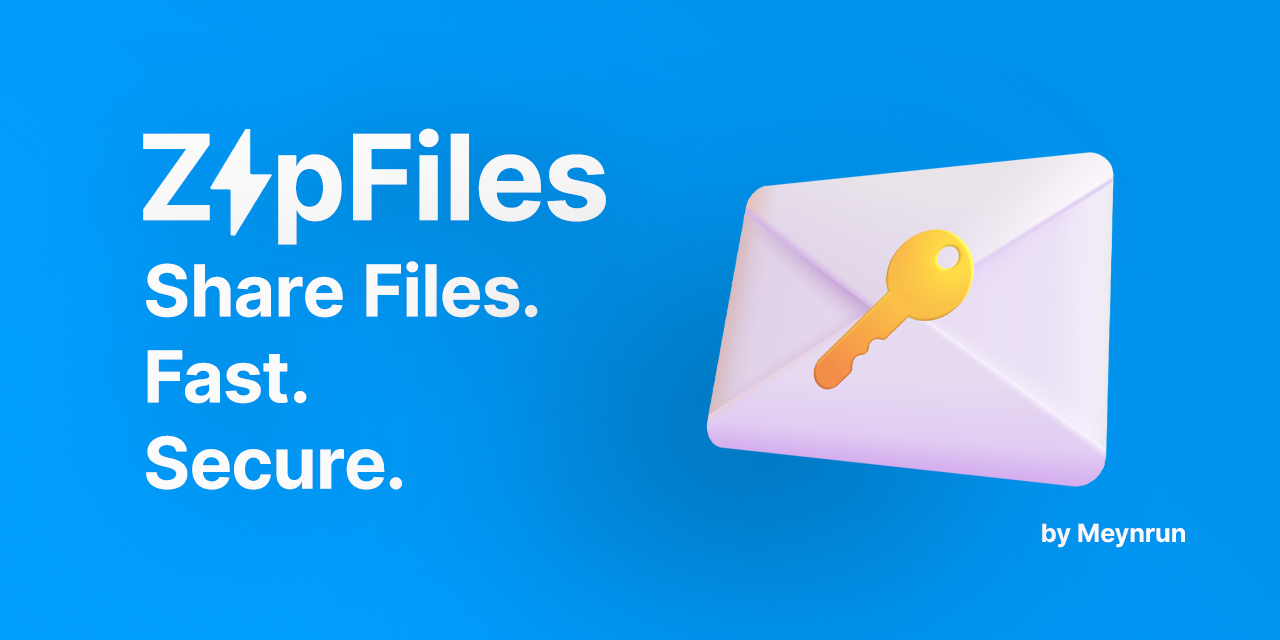
<style>
.page{position:relative;width:1280px;height:640px}
.page>*{position:absolute;margin:0}
.t1{font:118.8px "Inter-Bold";color:#fbfbfb}
.t2{font:71.8px "Inter-Bold";color:#fbfbfb}
.t3{font:25.3px "Inter-Bold";color:#fbfbfb}
</style>
<div class="page">
<p class="t1" style="left:143px;top:128px;width:463px;height:117px">Z  pFiles</p>
<p class="t2" style="left:146px;top:261px;width:392px;height:229px">Share Files.<br>Fast.<br>Secure.</p>
<p class="t3" style="left:1042px;top:523px;width:143px;height:25px">by Meynrun</p>
</div>
